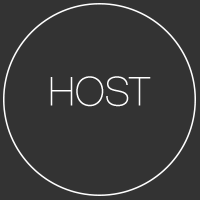
<style>
.page{position:relative;width:200px;height:200px;background:#333333}
.page>*{position:absolute;margin:0}
.t1{font:40px "HelveticaNeue-Thin";color:#ffffff}
</style>
<div class="page">
<p class="t1" style="left:50px;top:76px;width:101px;height:31px">HOST</p>
</div>
